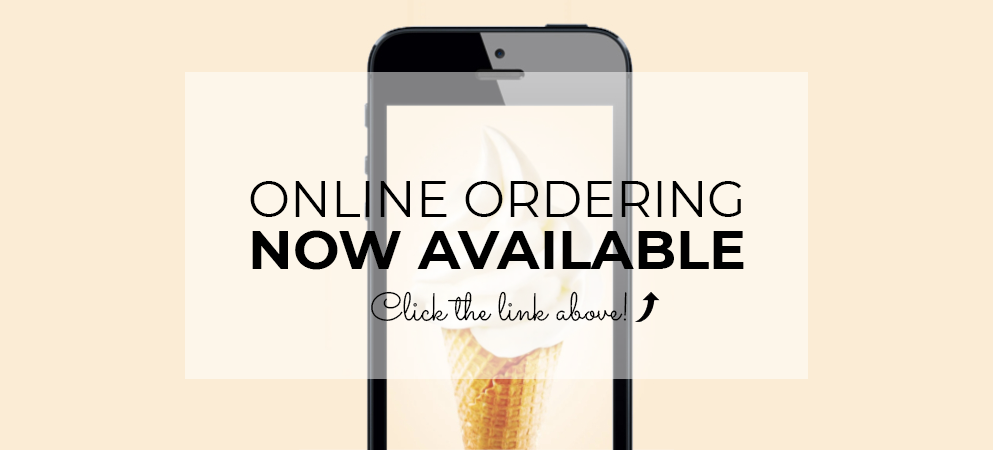
<style>
.page{position:relative;width:993px;height:450px;background:#fbecd5}
.page>*{position:absolute;margin:0}
.t1{font:50px "Montserrat-Regular";color:#000000}
.t2{font:55.2px "Montserrat-Bold";color:#000000}
.t3{font:39.6px "Sacramento-Regular";color:#000000}
</style>
<div class="page">
<p class="t1" style="left:250px;top:181px;width:492px;height:36px">ONLINE ORDERING</p>
<p class="t2" style="left:252px;top:230px;width:492px;height:40px">NOW AVAILABLE</p>
<p class="t3" style="left:371px;top:291px;width:256px;height:31px">Click the link above!</p>
</div>
